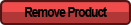
<style>
.page{position:relative;width:131px;height:25px;background:#b13737}
.page>*{position:absolute;margin:0}
.t1{font:14px "Arial-BoldMT";letter-spacing:-0.075em;color:#000000;scale:0.85 1}
</style>
<div class="page">
<p class="t1" style="left:25px;top:7px;width:82px;height:10px">Remove Product</p>
</div>
